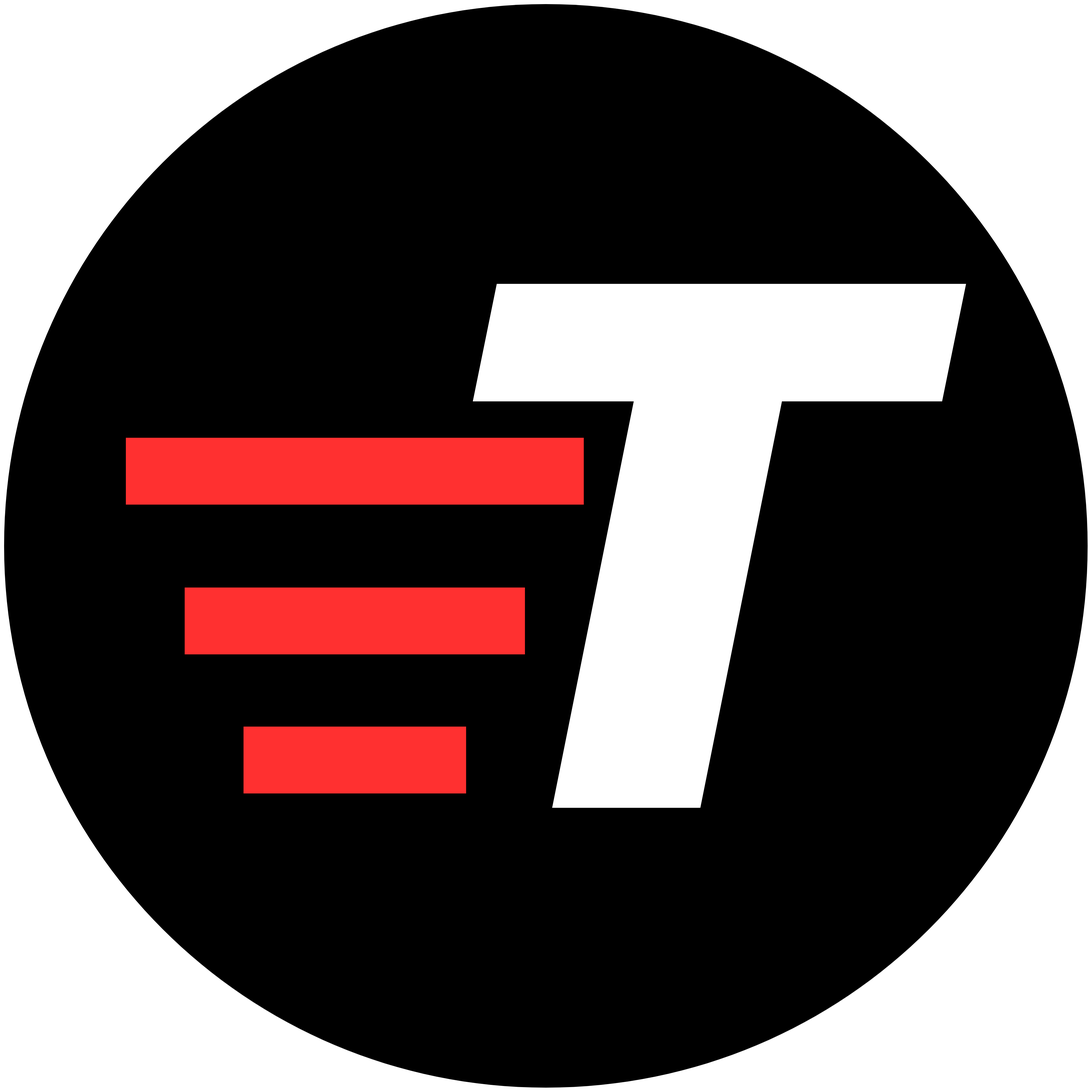
<style>
.page{position:relative;width:1092px;height:1092px;background:#000000}
.page>*{position:absolute;margin:0}
.t1{font:748.5px "Montserrat-ExtraBoldItalic";color:#ffffff}
</style>
<div class="page">
<p class="t1" style="left:473px;top:284px;width:493px;height:524px">T</p>
</div>
